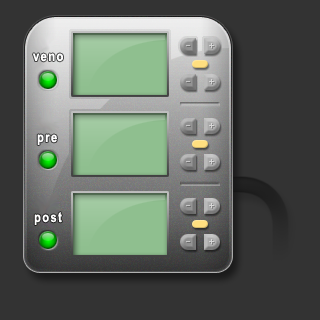
<style>
.page{position:relative;width:320px;height:320px;background:#333333}
.page>*{position:absolute;margin:0}
.t1{font:14px "Arial-BoldMT";letter-spacing:0.1em;color:#ffffff;scale:0.8 1}
</style>
<div class="page">
<p class="t1" style="left:33px;top:53px;width:30px;height:9px">veno</p>
<p class="t1" style="left:37px;top:134px;width:20px;height:11px">pre</p>
<p class="t1" style="left:34px;top:212px;width:28px;height:13px">post</p>
</div>
